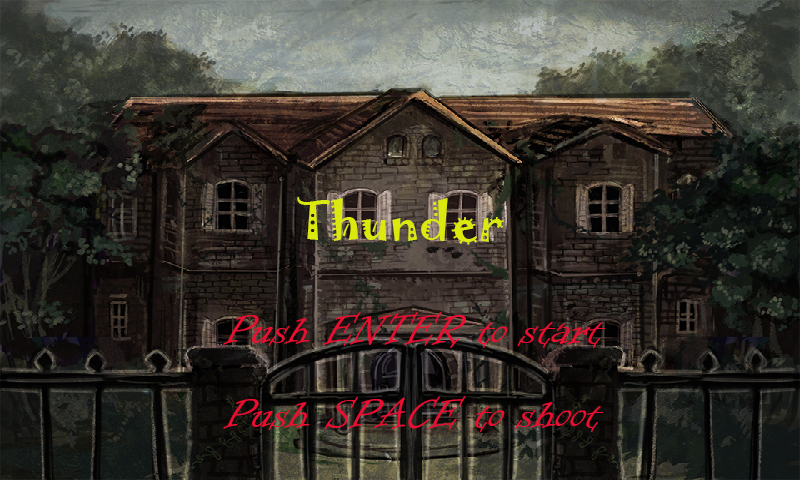
<style>
.page{position:relative;width:800px;height:480px}
.page>*{position:absolute;margin:0}
.t1{font:48px "Jokerman-Regular";color:#dce90e}
.t2{font:48px "InformalRoman-Regular";color:#e90e32}
</style>
<div class="page">
<p class="t1" style="left:297px;top:197px;width:207px;height:48px">Thunder</p>
<p class="t2" style="left:223px;top:312px;width:382px;height:120px">Push ENTER to start<br>Push SPACE to shoot</p>
</div>
